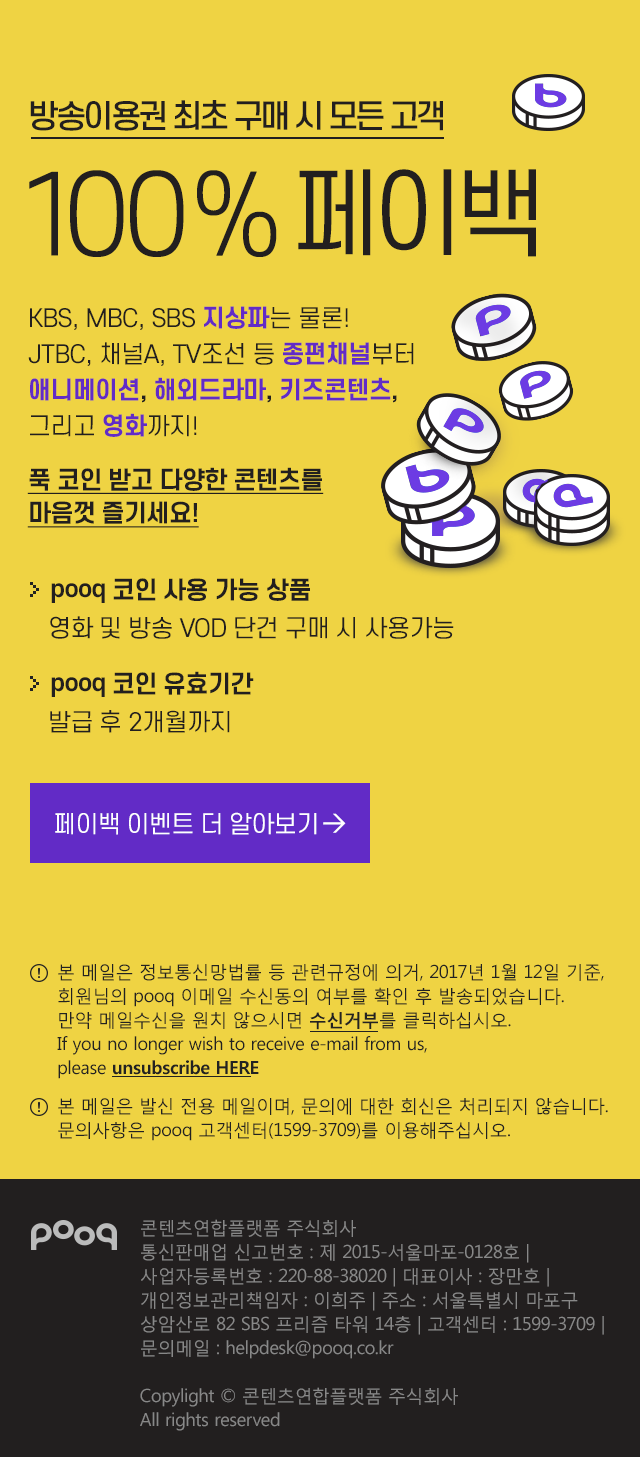
<style>
.page{position:relative;width:640px;height:1457px;background:#efd343}
.page>*{position:absolute;margin:0}
.t1{font:32px "CoreGothicE-5Medium";letter-spacing:-0.1em;color:#221f1f}
.t2{font:108px "CoreGothicE-3Light";color:#221f1f}
.t3{font:108px "CoreGothicE-3Light";letter-spacing:-0.15em;color:#221f1f}
.t4{font:108px "CoreGothicE-3Light";letter-spacing:-0.05em;color:#221f1f}
.t5{font:96px "CoreGothicE-4Regular";letter-spacing:-0.1em;color:#221f1f}
.t6{font:24px/36px "CoreGothicE-4Regular";letter-spacing:-0.025em;color:#221f1f}
.t7{font:24px/36px "CoreGothicE-6Bold";letter-spacing:-0.025em;color:#622bc6}
.t8{font:24px/36px "CoreGothicE-6Bold";letter-spacing:-0.025em;color:#221f1f}
.t9{font:24px/33.6px "CoreGothicE-6Bold";letter-spacing:-0.025em;color:#221f1f;text-decoration:underline}
.t10{font:24px "CoreGothicE-6Bold";letter-spacing:-0.025em;color:#221f1f}
.t11{font:24px "CoreGothicE-4Regular";letter-spacing:-0.025em;color:#221f1f}
.t12{font:24px "CoreGothicE-4Regular";letter-spacing:-0.025em;color:#ffffff}
.t13{font:24px "Dinmed";letter-spacing:-0.025em;color:#ffffff}
.t14{font:18px/24px "MalgunGothicRegular";letter-spacing:-0.025em;color:#222222}
.t15{font:18px/24px "MalgunGothicBold";letter-spacing:-0.025em;color:#222222}
.t16{font:18px/24px "MalgunGothicRegular";letter-spacing:-0.025em;color:#888888}
</style>
<div class="page">
<p class="t1" style="left:30px;top:100px;width:413px;height:31px">방송이용권 최초 구매 시 모든 고객</p>
<p class="t2" style="left:29px;top:170px;width:248px;height:87px"><span class="t3">1</span><span class="t4">0</span>0%</p>
<p class="t5" style="left:298px;top:169px;width:238px;height:88px">페이백</p>
<p class="t6" style="left:28px;top:306px;width:386px;height:131px">KBS, MBC, SBS <span class="t7">지상파</span>는 물론!<br>JTBC, 채널A, TV조선 등 <span class="t7">종편채널</span>부터<br><span class="t7">애니메이션</span><span class="t8">, </span><span class="t7">해외드라마</span><span class="t8">, </span><span class="t7">키즈콘텐츠</span><span class="t8">,<br></span>그리고 <span class="t7">영화</span>까지!</p>
<p class="t9" style="left:27px;top:467px;width:297px;height:61px">푹 코인 받고 다양한 콘텐츠를<br>마음껏 즐기세요!</p>
<p class="t10" style="left:51px;top:578px;width:259px;height:25px">pooq 코인 사용 가능 상품</p>
<p class="t11" style="left:50px;top:616px;width:404px;height:23px">영화 및 방송 VOD 단건 구매 시 사용가능</p>
<p class="t10" style="left:51px;top:671px;width:203px;height:26px">pooq 코인 유효기간</p>
<p class="t11" style="left:50px;top:710px;width:180px;height:23px">발급 후 2개월까지</p>
<p class="t12" style="left:55px;top:812px;width:262px;height:23px">페이백 이벤트 더 알아보기</p>
<p class="t13" style="left:323px;top:813px;width:23px;height:20px">&gt;</p>
<p class="t14" style="left:57px;top:964px;width:547px;height:115px">본 메일은 정보통신망법률 등 관련규정에 의거, 2017년 1월 12일 기준, 회원님의 pooq 이메일 수신동의 여부를 확인 후 발송되었습니다. <br>만약 메일수신을 원치 않으시면 <span class="t15">수신거부</span>를 클릭하십시오. <br>If you no longer wish to receive e-mail from us,<br>please <span class="t15">unsubscribe HERE</span></p>
<p class="t14" style="left:58px;top:1098px;width:550px;height:43px">본 메일은 발신 전용 메일이며, 문의에 대한 회신은 처리되지 않습니다. 문의사항은 pooq 고객센터(1599-3709)를 이용해주십시오.</p>
<p class="t16" style="left:140px;top:1219px;width:464px;height:212px">콘텐츠연합플랫폼 주식회사<br>통신판매업 신고번호 : 제 2015-서울마포-0128호 | 사업자등록번호 : 220-88-38020 | 대표이사 : 장만호 | 개인정보관리책임자 : 이희주 | 주소 : 서울특별시 마포구 상암산로 82 SBS 프리즘 타워 14층 | 고객센터 : 1599-3709 | 문의메일 : helpdesk@pooq.co.kr <br><br>Copylight © 콘텐츠연합플랫폼 주식회사<br>All rights reserved</p>
</div>
